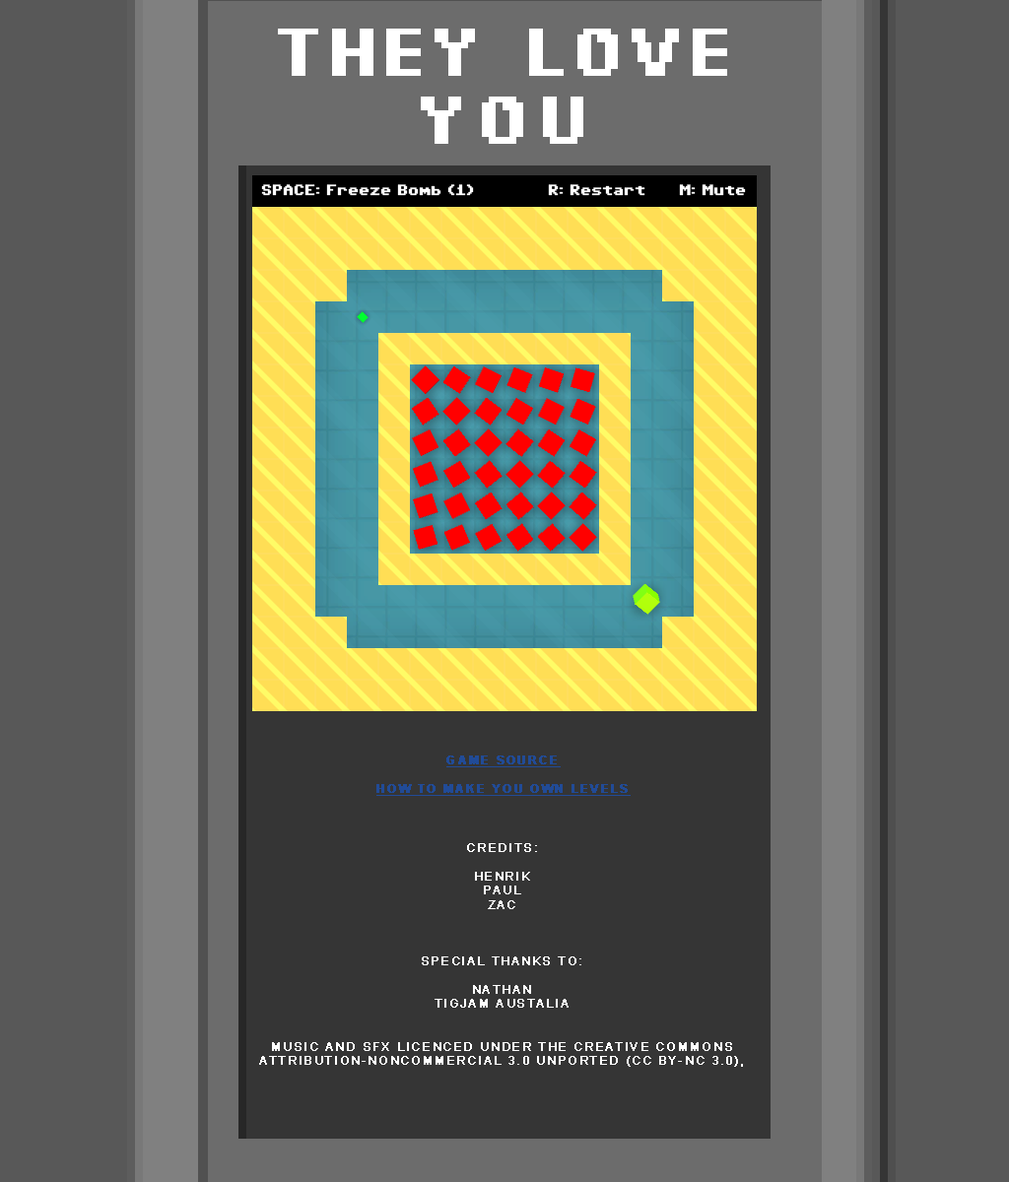
<style>
.page{position:relative;width:1009px;height:1182px;background:#585858}
.page>*{position:absolute;margin:0}
.t1{font:11.8px "Arial-BoldMT";letter-spacing:0.1em;color:#214b97;text-transform:uppercase;font-weight:bold;text-decoration:underline}
.t2{font:11.8px "ArialMT";letter-spacing:0.1em;color:#ffffff;text-transform:uppercase;font-weight:bold}
</style>
<div class="page">
<p class="t1" style="left:376px;top:756px;width:254px;height:40px;text-align:center">GAME SOURCE<br><br>HOW TO MAKE YOU OWN LEVELS</p>
<p class="t2" style="left:259px;top:843px;width:484px;height:224px;text-align:center">Credits:<br><br>Henrik<br>Paul <br>Zac<br><br><br><br>SPECIAL THANKS to:<br><br>NATHAN<br>TiGJAM Austalia<br><br><br>MUSIC AND SFX LICENCED under the Creative Commons Attribution-NonCommercial 3.0 unported (CC BY-NC 3.0),</p>
</div>
